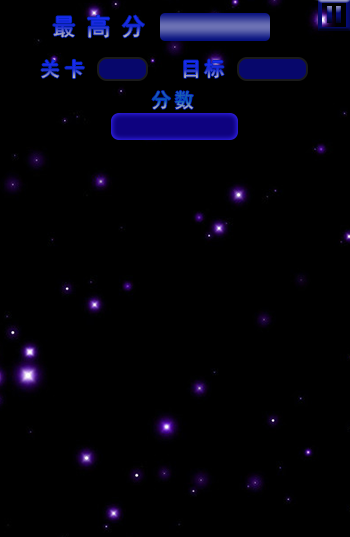
<style>
.page{position:relative;width:350px;height:537px;background:#000000}
.page>*{position:absolute;margin:0}
.t1{font:24px "SimHei";letter-spacing:0.44em}
.t2{font:20px "SimHei";letter-spacing:0.22em}
.t3{font:20px "SimHei";letter-spacing:0.16em}
.t4{font:20px "SimHei";letter-spacing:0.16em;color:#1a5db1}
</style>
<div class="page">
<p class="t1" style="left:53px;top:15px;width:91px;height:23px">最高分</p>
<p class="t2" style="left:41px;top:59px;width:43px;height:20px">关卡</p>
<p class="t3" style="left:184px;top:59px;width:40px;height:19px">目标</p>
<p class="t4" style="left:152px;top:90px;width:41px;height:19px">分数</p>
</div>
